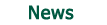
<style>
.page{position:relative;width:107px;height:25px;background:#ffffff}
.page>*{position:absolute;margin:0}
.t1{font:18px "Tahoma";letter-spacing:0.02em;color:#005941;font-weight:bold}
</style>
<div class="page">
<p class="t1" style="left:29px;top:5px;width:45px;height:15px">News</p>
</div>
